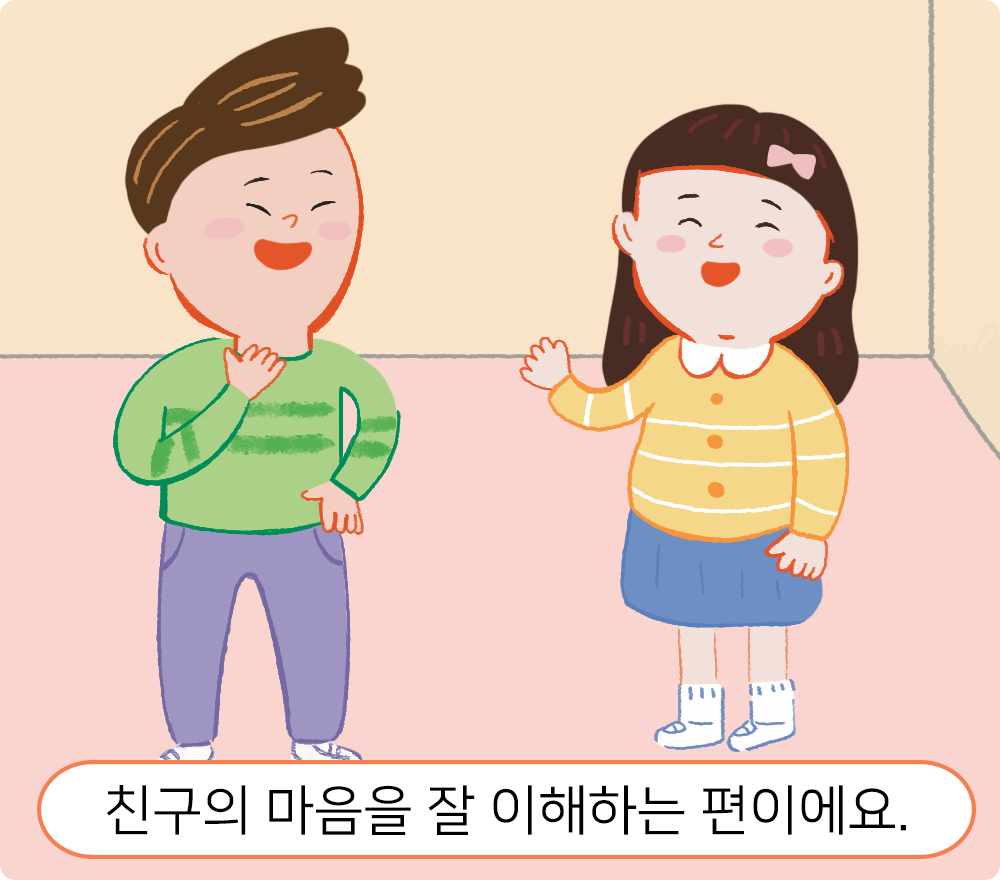
<style>
.page{position:relative;width:1000px;height:880px;background:#fad5cf}
.page>*{position:absolute;margin:0}
.t1{font:54.2px "NanumSquareR";color:#000000}
</style>
<div class="page">
<p class="t1" style="left:106px;top:785px;width:800px;height:50px">친구의 마음을 잘 이해하는 편이에요.</p>
</div>
